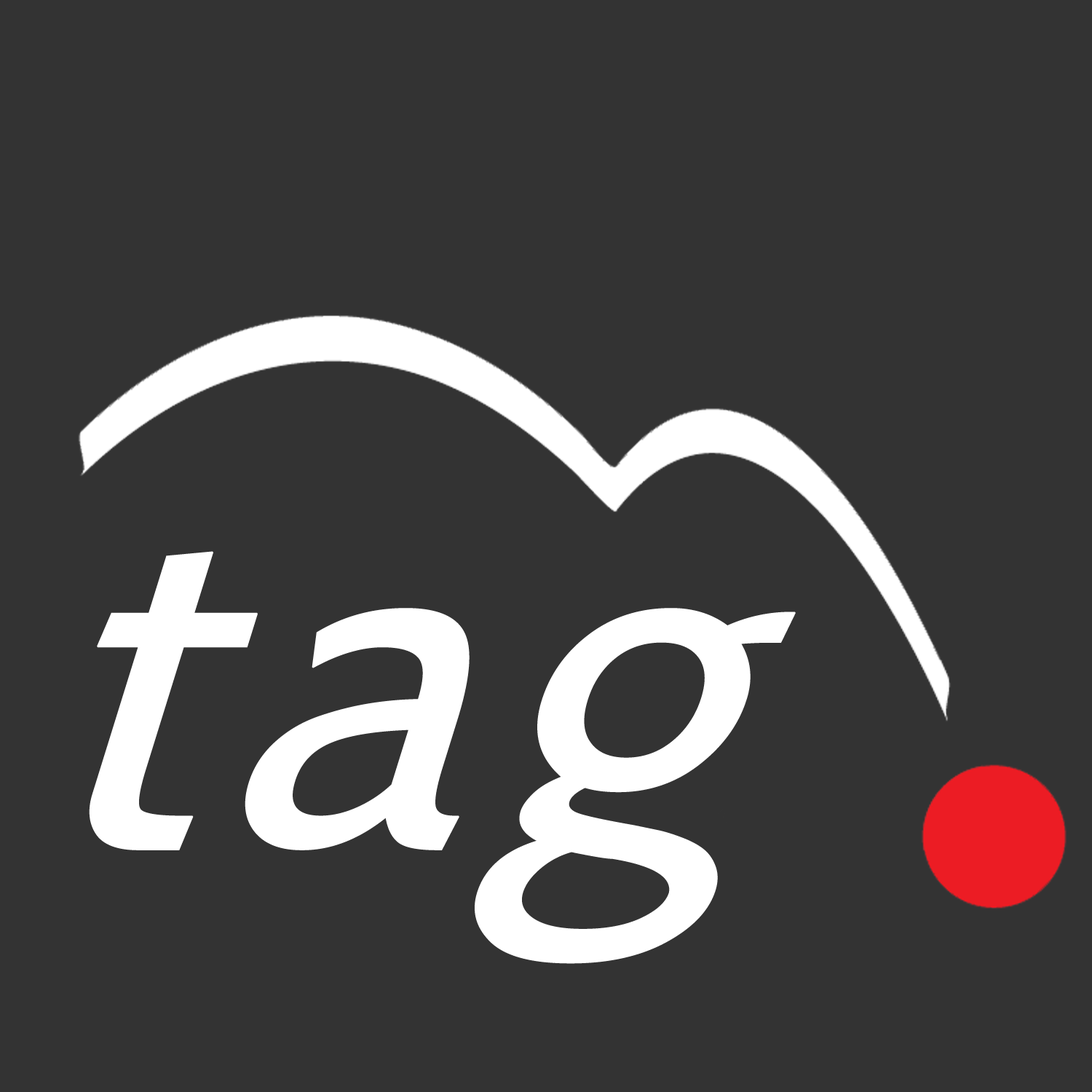
<style>
.page{position:relative;width:1092px;height:1092px;background:#333333}
.page>*{position:absolute;margin:0}
.t1{font:493.9px "Cabin-Regular";letter-spacing:0.025em;color:#ffffff;font-weight:bold}
</style>
<div class="page">
<p class="t1" style="left:89px;top:551px;width:707px;height:413px">tag</p>
</div>
